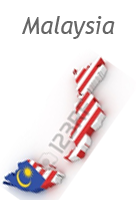
<style>
.page{position:relative;width:136px;height:200px;background:#ffffff}
.page>*{position:absolute;margin:0}
.t1{font:24px "TrebuchetMS-Italic";color:#666666}
</style>
<div class="page">
<p class="t1" style="left:22px;top:16px;width:93px;height:23px">Malaysia</p>
</div>
